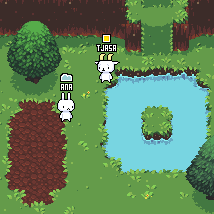
<style>
.page{position:relative;width:214px;height:214px;background:#649b4a}
.page>*{position:absolute;margin:0}
.t1{font:8px "Pixel";letter-spacing:-0.12em;color:#ffffff}
.t2{font:8px "Pixel";letter-spacing:-0.1em;color:#ffffff}
</style>
<div class="page">
<p class="t1" style="left:97px;top:45px;width:19px;height:6px">tjasa</p>
<p class="t2" style="left:61px;top:84px;width:11px;height:6px">ana</p>
</div>
